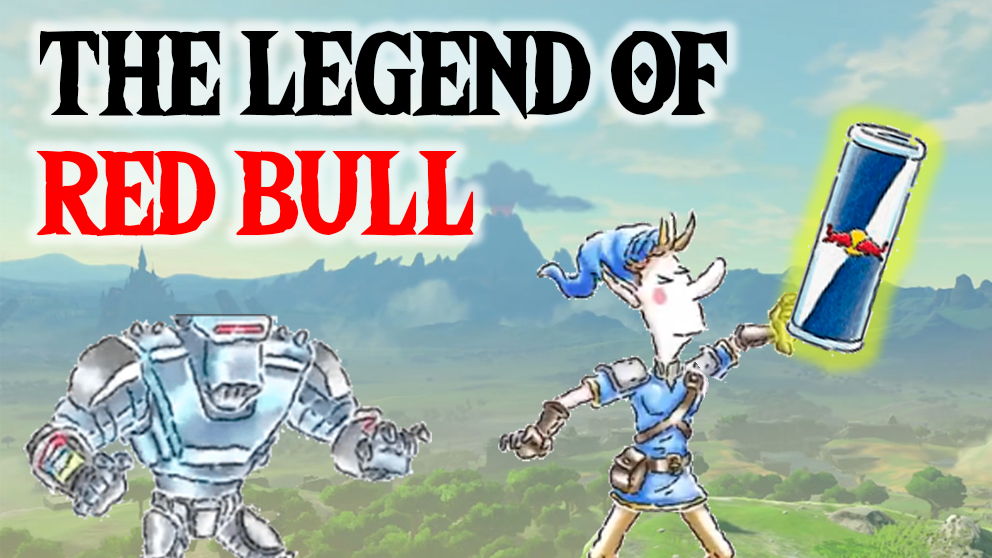
<style>
.page{position:relative;width:992px;height:558px}
.page>*{position:absolute;margin:0}
.t1{font:120px/120px "TheWildBreathofZelda";letter-spacing:-0.025em;color:#000000}
.t2{font:120px/120px "TheWildBreathofZelda";letter-spacing:-0.025em;color:#ff0000}
</style>
<div class="page">
<p class="t1" style="left:36px;top:30px;width:691px;height:207px">THE LEGEND OF<br><span class="t2">RED BULL</span></p>
</div>
